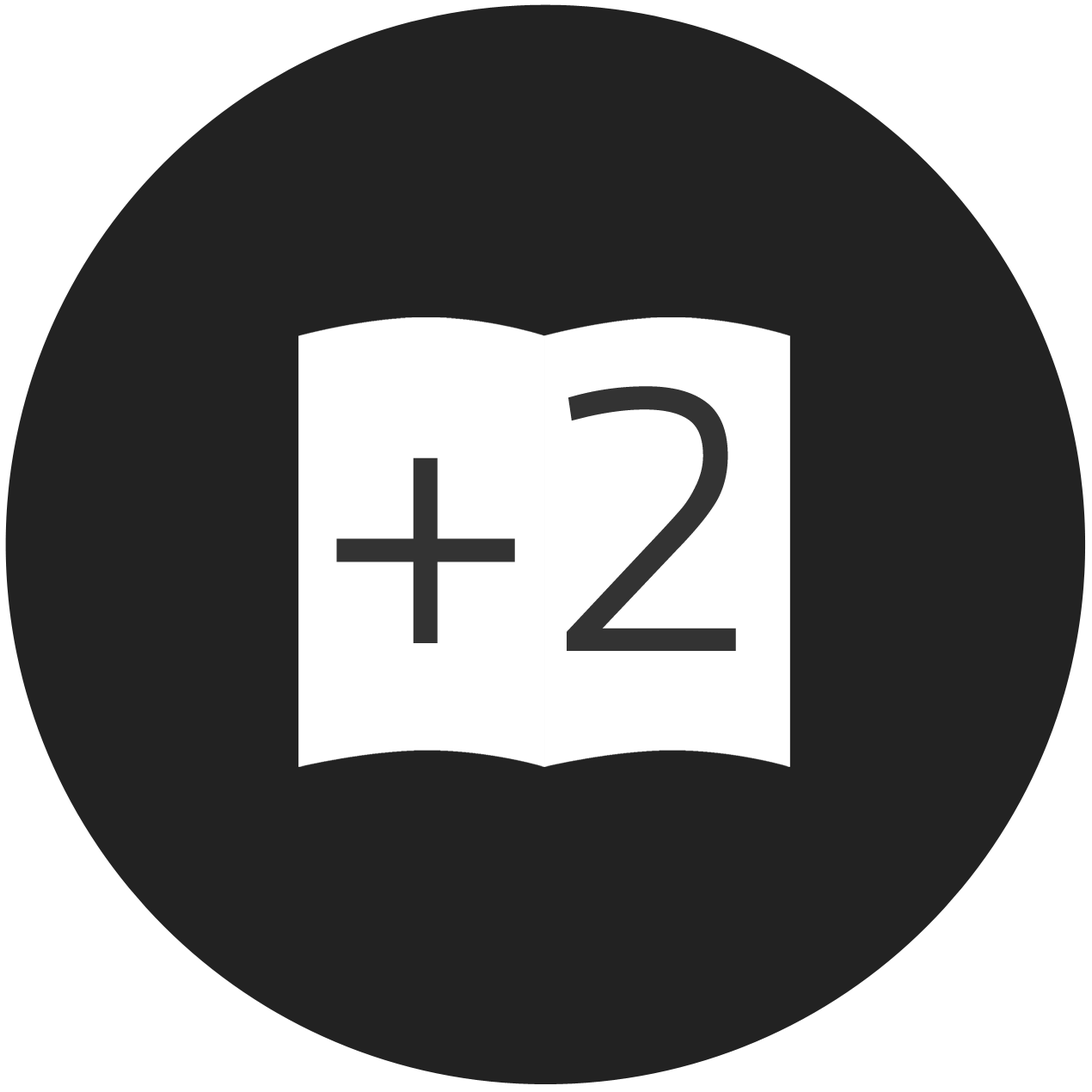
<style>
.page{position:relative;width:1092px;height:1092px;background:#222222}
.page>*{position:absolute;margin:0}
.t1{font:380px "TitilliumWeb-Thin";letter-spacing:0.05em;color:#333333;font-weight:bold}
</style>
<div class="page">
<p class="t1" style="left:336px;top:386px;width:400px;height:265px">+2</p>
</div>
